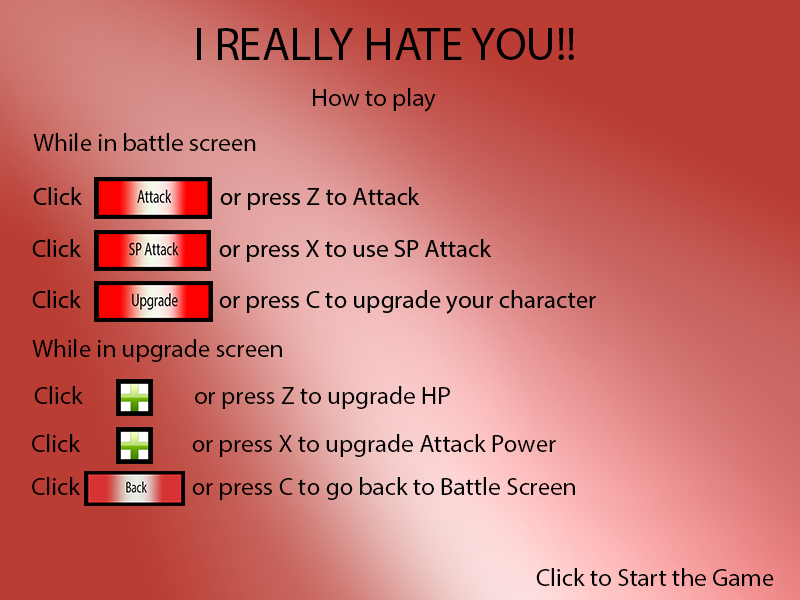
<style>
.page{position:relative;width:800px;height:600px}
.page>*{position:absolute;margin:0}
.t1{font:46px "MyriadPro-Regular";color:#000000}
.t2{font:25px "MyriadPro-Regular";color:#000000}
</style>
<div class="page">
<p class="t1" style="left:197px;top:28px;width:377px;height:32px">I REALLY HATE YOU!!</p>
<p class="t2" style="left:313px;top:88px;width:123px;height:24px">How to play</p>
<p class="t2" style="left:33px;top:133px;width:223px;height:18px">While in battle screen</p>
<p class="t2" style="left:32px;top:339px;width:250px;height:23px">While in upgrade screen</p>
<p class="t2" style="left:34px;top:386px;width:416px;height:23px">Click                     or press Z to upgrade HP</p>
<p class="t2" style="left:32px;top:434px;width:524px;height:23px">Click                     or press X to upgrade Attack Power</p>
<p class="t2" style="left:32px;top:477px;width:543px;height:23px">Click                     or press C to go back to Battle Screen</p>
<p class="t2" style="left:536px;top:568px;width:238px;height:18px">Click to Start the Game</p>
</div>
